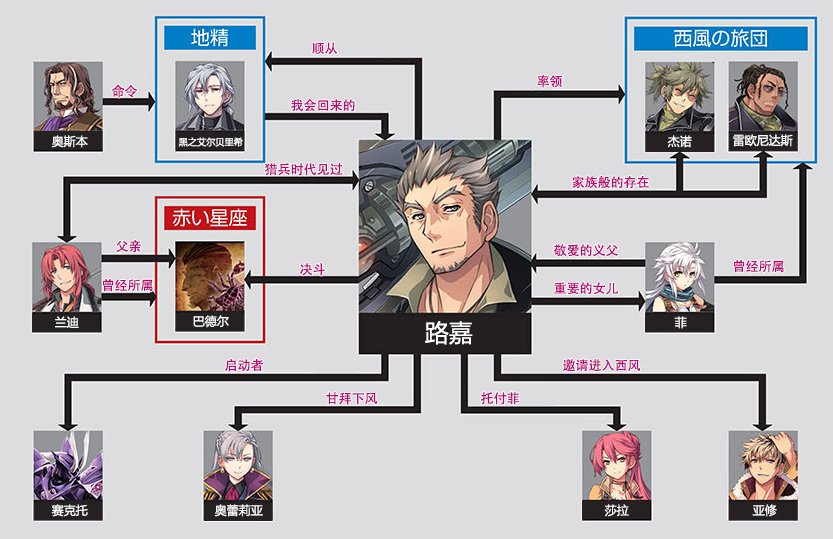
<style>
.page{position:relative;width:833px;height:539px;background:#dddddf}
.page>*{position:absolute;margin:0}
.t1{font:13px "AdobeHeitiStd-Regular";color:#b70773}
.t2{font:12px "MicrosoftYaHei";color:#ffffff}
.t3{font:9.2px "MicrosoftYaHei";color:#ffffff}
.t4{font:24px "MicrosoftYaHei";color:#ffffff}
</style>
<div class="page">
<p class="t1" style="left:312px;top:42px;width:26px;height:13px">顺从</p>
<p class="t1" style="left:537px;top:75px;width:26px;height:13px">率领</p>
<p class="t1" style="left:111px;top:84px;width:27px;height:14px">命令</p>
<p class="t1" style="left:291px;top:99px;width:64px;height:13px">我会回来的</p>
<p class="t2" style="left:51px;top:135px;width:37px;height:13px">奥斯本</p>
<p class="t3" style="left:178px;top:137px;width:65px;height:10px">黑之艾尔贝里希</p>
<p class="t2" style="left:667px;top:135px;width:25px;height:13px">杰诺</p>
<p class="t2" style="left:733px;top:134px;width:60px;height:13px">雷欧尼达斯</p>
<p class="t1" style="left:265px;top:163px;width:78px;height:13px">猎兵时代见过</p>
<p class="t1" style="left:572px;top:176px;width:77px;height:13px">家族般的存在</p>
<p class="t1" style="left:116px;top:240px;width:25px;height:13px">父亲</p>
<p class="t1" style="left:554px;top:244px;width:64px;height:13px">敬爱的义父</p>
<p class="t1" style="left:300px;top:263px;width:25px;height:13px">决斗</p>
<p class="t1" style="left:734px;top:260px;width:50px;height:13px">曾经所属</p>
<p class="t1" style="left:103px;top:279px;width:50px;height:13px">曾经所属</p>
<p class="t1" style="left:554px;top:282px;width:65px;height:13px">重要的女儿</p>
<p class="t2" style="left:55px;top:316px;width:24px;height:12px">兰迪</p>
<p class="t2" style="left:193px;top:315px;width:36px;height:13px">巴德尔</p>
<p class="t2" style="left:674px;top:316px;width:13px;height:13px">菲</p>
<p class="t4" style="left:425px;top:321px;width:48px;height:24px">路嘉</p>
<p class="t1" style="left:225px;top:359px;width:38px;height:13px">启动者</p>
<p class="t1" style="left:563px;top:359px;width:78px;height:13px">邀请进入西风</p>
<p class="t1" style="left:326px;top:392px;width:52px;height:13px">甘拜下风</p>
<p class="t1" style="left:481px;top:392px;width:38px;height:13px">托付菲</p>
<p class="t2" style="left:51px;top:504px;width:37px;height:13px">赛克托</p>
<p class="t2" style="left:214px;top:504px;width:49px;height:13px">奥蕾莉亚</p>
<p class="t2" style="left:604px;top:504px;width:25px;height:13px">莎拉</p>
<p class="t2" style="left:752px;top:504px;width:25px;height:13px">亚修</p>
</div>
